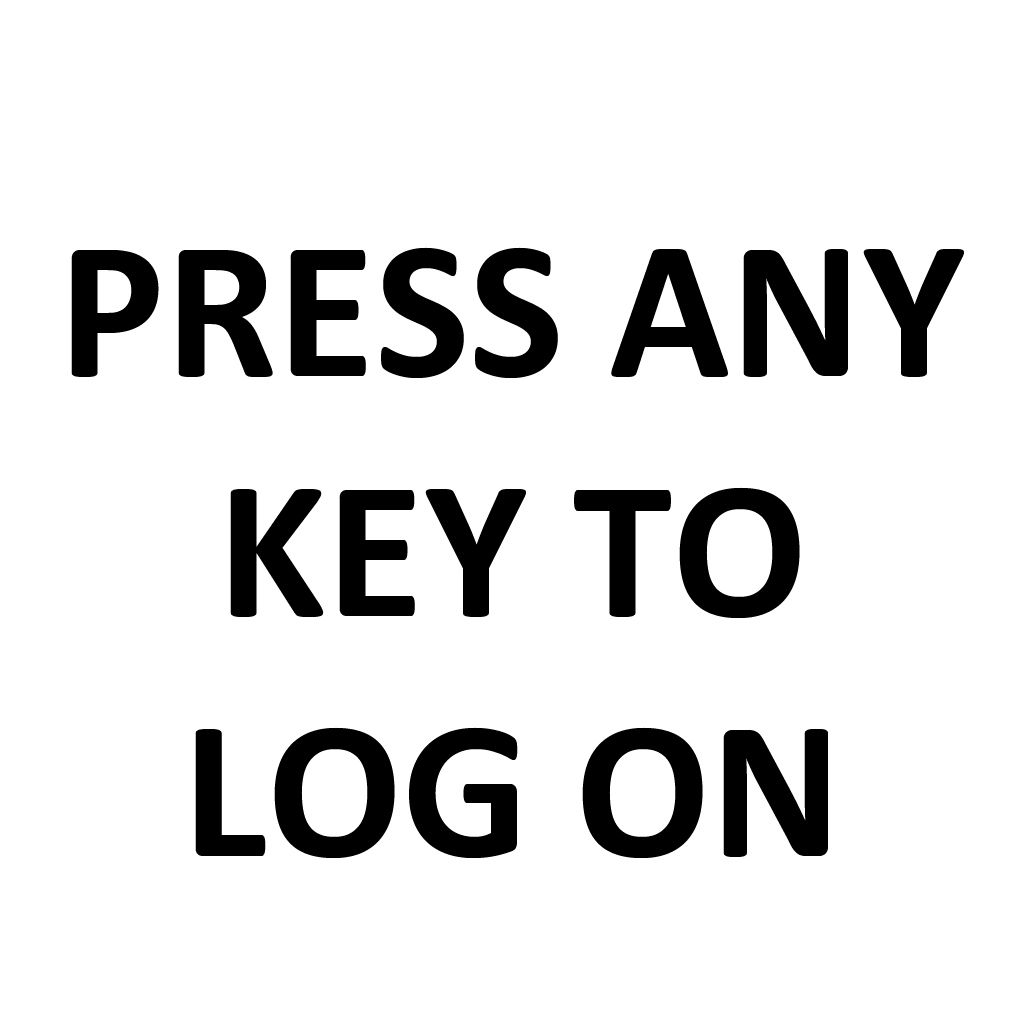
<style>
.page{position:relative;width:1024px;height:1024px;background:#ffffff}
.page>*{position:absolute;margin:0}
.t1{font:200px "Calibri-Bold";color:#000000}
</style>
<div class="page">
<p class="t1" style="left:71px;top:247px;width:893px;height:611px;text-align:center">PRESS ANY KEY TO <br>LOG ON</p>
</div>
